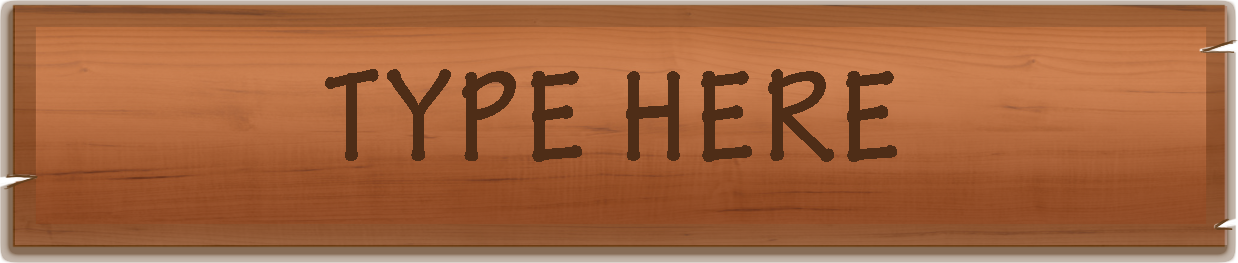
<style>
.page{position:relative;width:1238px;height:263px}
.page>*{position:absolute;margin:0}
.t1{font:138px "TektonPro-BoldCond";letter-spacing:0.05em;color:#4e2d17}
</style>
<div class="page">
<p class="t1" style="left:325px;top:69px;width:572px;height:93px">TYPE HERE</p>
</div>
